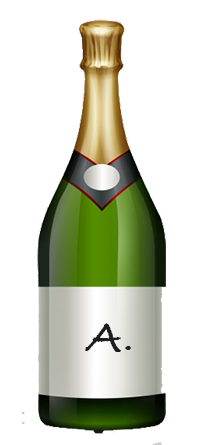
<style>
.page{position:relative;width:200px;height:445px;background:#ffffff}
.page>*{position:absolute;margin:0}
.t1{font:47.7px "BradleyHandITCTT-Bold";color:#1d1d1d}
</style>
<div class="page">
<p class="t1" style="left:85px;top:323px;width:46px;height:29px">A.</p>
</div>
